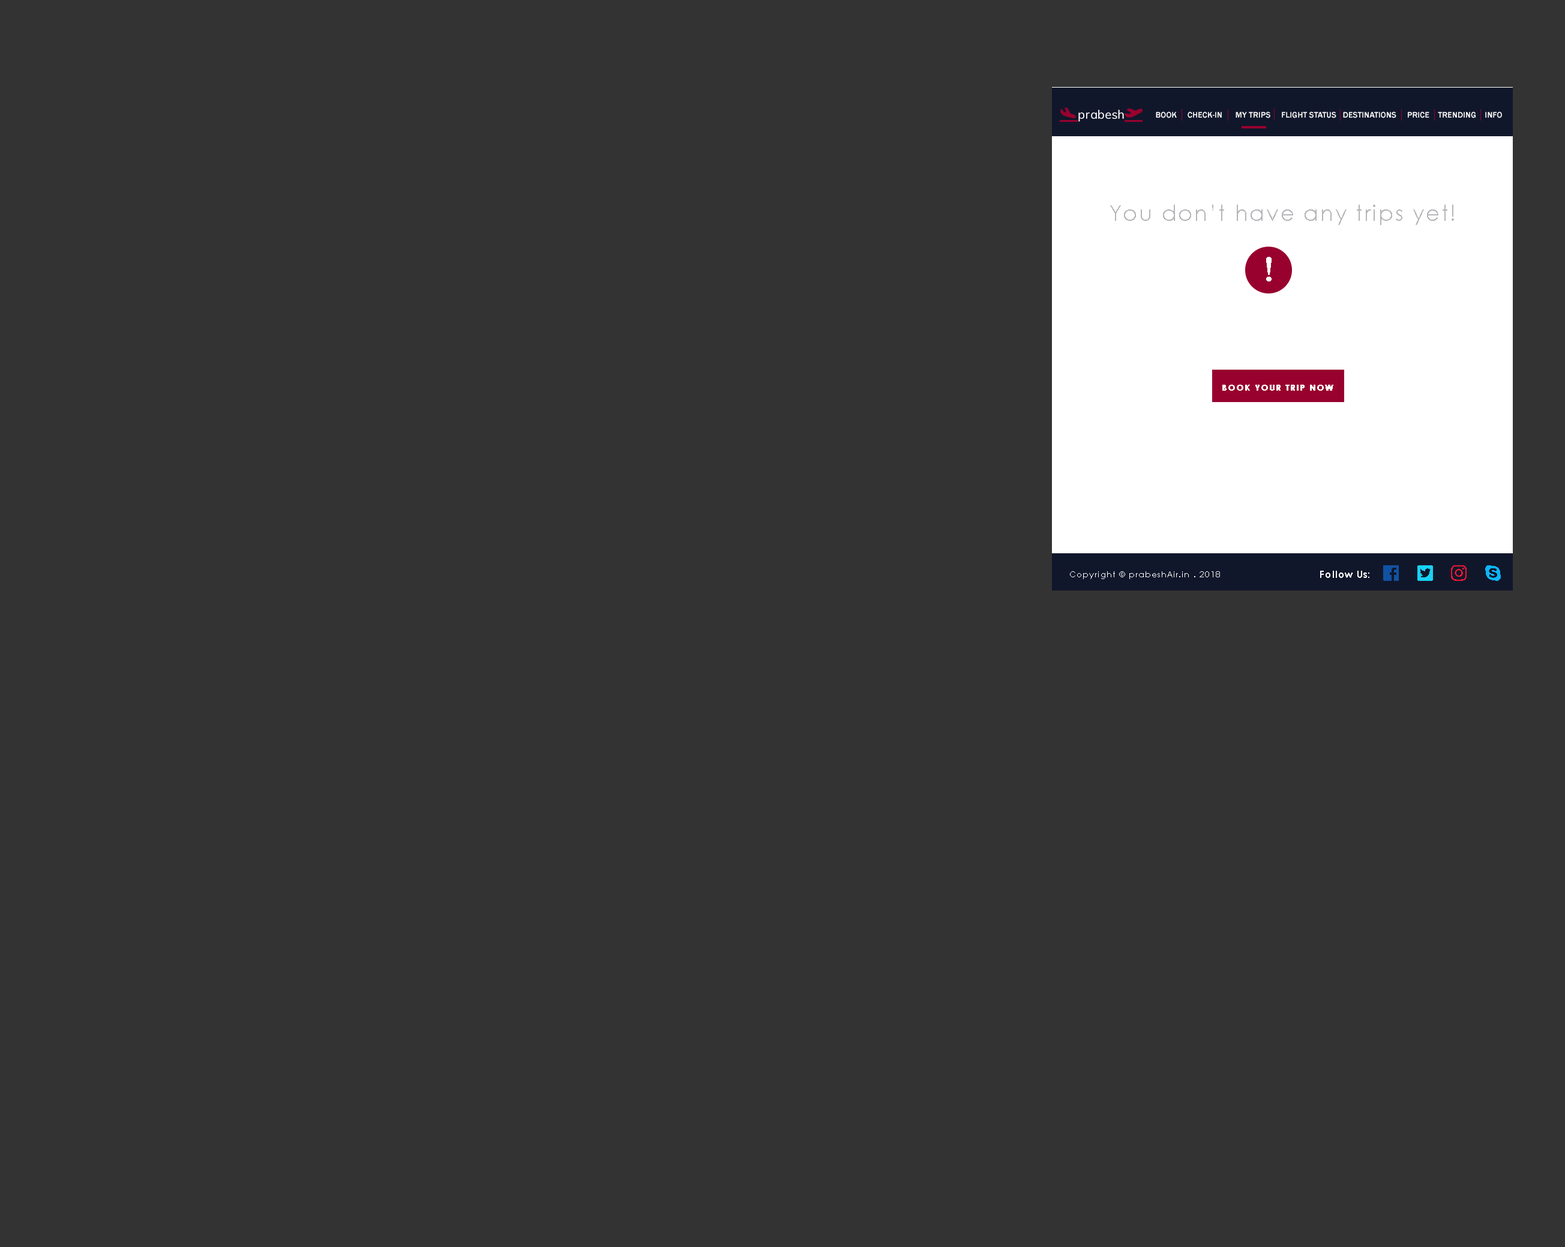
<style>
.page{position:relative;width:1565px;height:1247px;background:#333333}
.page>*{position:absolute;margin:0}
.t1{font:8.4px "FranklinGothic-Medium";letter-spacing:0.005em;color:#ffffff}
.t2{font:21.6px "CenturyGothic";letter-spacing:0.075em;color:#b4b5b8}
.t3{font:36px "BaskOldFace";letter-spacing:0.075em;color:#ffffff;font-weight:bold}
.t4{font:8.4px "CenturyGothic-Bold";letter-spacing:0.075em;color:#ffffff;font-weight:bold}
.t5{font:8.4px "CenturyGothic";letter-spacing:0.075em;color:#ffffff}
.t6{font:9.6px "CenturyGothic-Bold";letter-spacing:0.075em;color:#ffffff}
</style>
<div class="page">
<p class="t1" style="left:1156px;top:112px;width:346px;height:6px">BOOK     CHECK-IN      MY TRIPS     FLIGHT STATUS   DESTINATIONS     PRICE    TRENDING    INFO</p>
<p class="t2" style="left:1110px;top:205px;width:344px;height:20px">You don’t have any trips yet!</p>
<p class="t3" style="left:1266px;top:257px;width:5px;height:24px">!</p>
<p class="t4" style="left:1222px;top:385px;width:111px;height:6px">BOOK YOUR TRIP NOW</p>
<p class="t5" style="left:1070px;top:571px;width:150px;height:8px">Copyright © prabeshAir.in . 2018</p>
<p class="t6" style="left:1320px;top:571px;width:49px;height:7px">Follow Us:</p>
</div>
